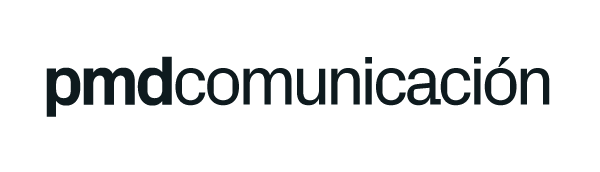
<style>
.page{position:relative;width:600px;height:172px;background:#ffffff}
.page>*{position:absolute;margin:0}
.t1{font:70px "PxGroteskRegular";letter-spacing:-0.08em;color:#0e1a1e}
.t2{font:70px "PxGrotesk-Bold";letter-spacing:-0.1em;color:#0e1a1e;font-weight:bold}
.t3{font:60px "TimesNewRomanPSMT";letter-spacing:-0.07em;color:#0e1a1e;scale:1.23 1}
</style>
<div class="page">
<p class="t1" style="left:46px;top:56px;width:504px;height:61px"><span class="t2">pmd</span>comunicacion</p>
<p class="t3" style="left:498px;top:57px;width:12px;height:10px;rotate:180deg">`</p>
</div>
